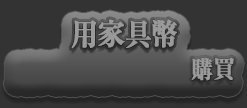
<style>
.page{position:relative;width:247px;height:108px;background:#333333}
.page>*{position:absolute;margin:0}
.t1{font:30px/38px "RyuminPr6N-ExBold";color:#9a9a9a;font-weight:bold;scale:0.9 1}
.t2{font:24px "RyuminPro-ExBold";color:#9a9a9a;font-weight:bold;scale:0.9 1}
</style>
<div class="page">
<p class="t1" style="left:71px;top:19px;width:163px;height:62px;text-align:center">用家具幣<br><span class="t2">　　　　　　　　購買</span></p>
</div>
